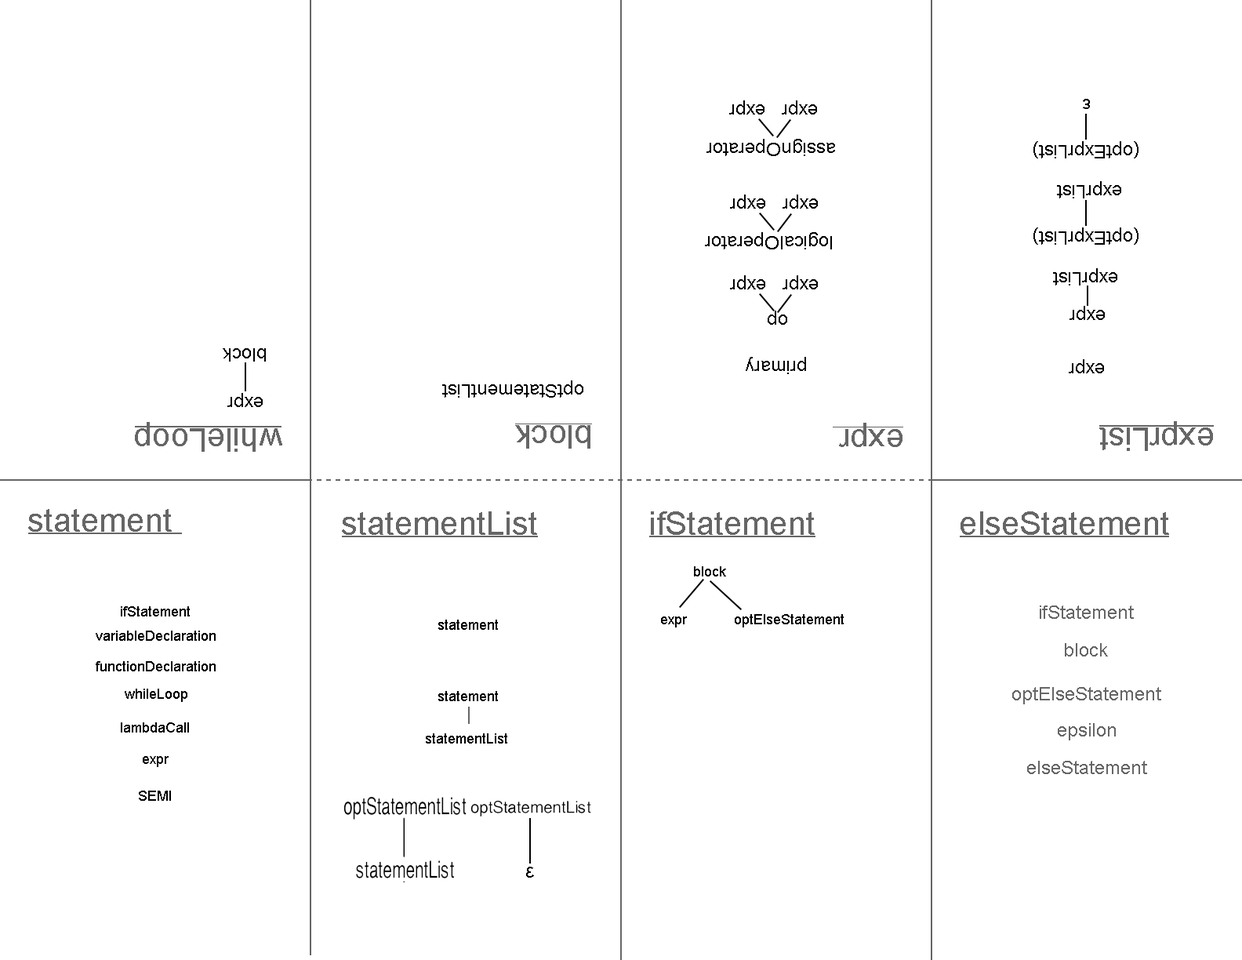
<style>
.page{position:relative;width:1242px;height:960px;background:#ffffff}
.page>*{position:absolute;margin:0}
.t1{font:9.4px "ArialMT";color:#000000}
.t2{font:18.9px "ArialMT";color:#000000}
.t3{font:33px "ArialMT";color:#666666}
.t4{font:32.9px "ArialMT";color:#666666}
.t5{font:14.1px "ArialMT";color:#000000}
.t6{font:18.8px "ArialMT";color:#666666}
.t7{font:9.4px "ArialMT";color:#666666}
.t8{font:20.4px "ArialMT";color:#000000}
</style>
<div class="page">
<p class="t1" style="left:729px;top:100px;width:36px;height:14px;rotate:180deg">expr</p>
<p class="t1" style="left:782px;top:100px;width:35px;height:14px;rotate:180deg">expr</p>
<p class="t1" style="left:1083px;top:99px;width:7px;height:10px;rotate:180deg">ε</p>
<p class="t1" style="left:707px;top:139px;width:128px;height:17px;rotate:180deg">assignOperator</p>
<p class="t1" style="left:1034px;top:141px;width:105px;height:17px;rotate:180deg">(optExprList)</p>
<p class="t1" style="left:1057px;top:181px;width:64px;height:17px;rotate:180deg">exprList</p>
<p class="t1" style="left:730px;top:194px;width:35px;height:15px;rotate:180deg">expr</p>
<p class="t1" style="left:783px;top:194px;width:35px;height:15px;rotate:180deg">expr</p>
<p class="t1" style="left:705px;top:232px;width:127px;height:17px;rotate:180deg">logicalOperator</p>
<p class="t1" style="left:1034px;top:227px;width:105px;height:18px;rotate:180deg">(optExprList)</p>
<p class="t1" style="left:1053px;top:268px;width:65px;height:17px;rotate:180deg">exprList</p>
<p class="t1" style="left:730px;top:275px;width:35px;height:14px;rotate:180deg">expr</p>
<p class="t1" style="left:783px;top:275px;width:35px;height:14px;rotate:180deg">expr</p>
<p class="t1" style="left:1070px;top:306px;width:35px;height:14px;rotate:180deg">expr</p>
<p class="t1" style="left:768px;top:311px;width:19px;height:14px;rotate:180deg">op</p>
<p class="t1" style="left:223px;top:348px;width:43px;height:14px;rotate:180deg">block</p>
<p class="t1" style="left:746px;top:357px;width:60px;height:17px;rotate:180deg">primary</p>
<p class="t1" style="left:1069px;top:359px;width:35px;height:14px;rotate:180deg">expr</p>
<p class="t1" style="left:442px;top:380px;width:141px;height:18px;rotate:180deg">optStatementList</p>
<p class="t2" style="left:227px;top:393px;width:36px;height:14px;rotate:180deg">expr</p>
<p class="t3" style="left:135px;top:422px;width:147px;height:30px;rotate:180deg">whileLoop</p>
<p class="t3" style="left:515px;top:425px;width:76px;height:24px;rotate:180deg">block</p>
<p class="t3" style="left:839px;top:423px;width:64px;height:24px;rotate:180deg">expr</p>
<p class="t3" style="left:1100px;top:421px;width:113px;height:30px;rotate:180deg">exprList</p>
<p class="t4" style="left:28px;top:509px;width:144px;height:23px">statement</p>
<p class="t4" style="left:342px;top:511px;width:195px;height:24px">statementList</p>
<p class="t4" style="left:651px;top:511px;width:164px;height:24px">ifStatement</p>
<p class="t4" style="left:961px;top:511px;width:208px;height:24px">elseStatement</p>
<p class="t5" style="left:694px;top:566px;width:32px;height:10px">block</p>
<p class="t6" style="left:1040px;top:605px;width:94px;height:14px">ifStatement</p>
<p class="t5" style="left:121px;top:606px;width:69px;height:10px">ifStatement</p>
<p class="t5" style="left:661px;top:616px;width:26px;height:11px">expr</p>
<p class="t5" style="left:735px;top:614px;width:109px;height:13px">optElseStatement</p>
<p class="t5" style="left:438px;top:620px;width:60px;height:10px">statement</p>
<p class="t5" style="left:96px;top:631px;width:120px;height:10px">variableDeclaration</p>
<p class="t7" style="left:1065px;top:643px;width:43px;height:13px">block</p>
<p class="t5" style="left:96px;top:661px;width:120px;height:10px">functionDeclaration</p>
<p class="t5" style="left:125px;top:689px;width:62px;height:13px">whileLoop</p>
<p class="t7" style="left:1012px;top:687px;width:149px;height:17px">optElseStatement</p>
<p class="t5" style="left:438px;top:691px;width:60px;height:10px">statement</p>
<p class="t5" style="left:121px;top:722px;width:68px;height:10px">lambdaCall</p>
<p class="t7" style="left:1058px;top:723px;width:58px;height:17px">epsilon</p>
<p class="t5" style="left:426px;top:733px;width:81px;height:10px">statementList</p>
<p class="t5" style="left:143px;top:756px;width:26px;height:11px">expr</p>
<p class="t7" style="left:1027px;top:761px;width:120px;height:13px">elseStatement</p>
<p class="t5" style="left:139px;top:791px;width:32px;height:10px">SEMI</p>
<p class="t8" style="left:526px;top:867px;width:8px;height:11px">ε</p>
</div>
